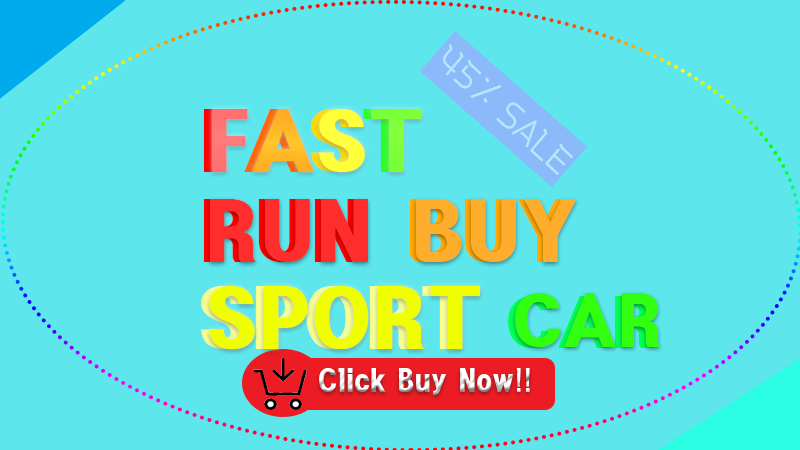
<style>
.page{position:relative;width:800px;height:450px;background:#5de7ed}
.page>*{position:absolute;margin:0}
.t1{font:48.9px "BBTreeTR";color:#b7e7fa;scale:0.95 1}
.t2{font:72px "HeadlineR-HM"}
.t3{font:60px "HeadlineR-HM"}
.t4{font:72px "HeadlineR-HM";color:#ff2d2d}
.t5{font:72px "HeadlineR-HM";color:#ffad2d}
.t6{font:72px "HeadlineR-HM";color:#f0ff00}
.t7{font:61.7px "HeadlineR-HM";color:#31ff0f}
.t8{font:28px "HeadlineR-HM";color:#ffffff;scale:0.79 1}
</style>
<div class="page">
<p class="t1" style="left:443px;top:44px;width:130px;height:131px;rotate:42deg">45% SALE</p>
<p class="t2" style="left:203px;top:109px;width:210px;height:63px">FAST</p>
<p class="t2" style="left:211px;top:109px;width:210px;height:63px">FAST</p>
<p class="t2" style="left:201px;top:199px;width:453px;height:150px">RUN BUY SPORT <span class="t3">CAR</span></p>
<p class="t4" style="left:209px;top:199px;width:368px;height:63px">RUN <span class="t5">BUY</span></p>
<p class="t6" style="left:209px;top:286px;width:271px;height:63px">SPORT</p>
<p class="t7" style="left:515px;top:293px;width:146px;height:54px">CAR</p>
<p class="t8" style="left:319px;top:368px;width:211px;height:27px">Click Buy Now!!</p>
</div>
